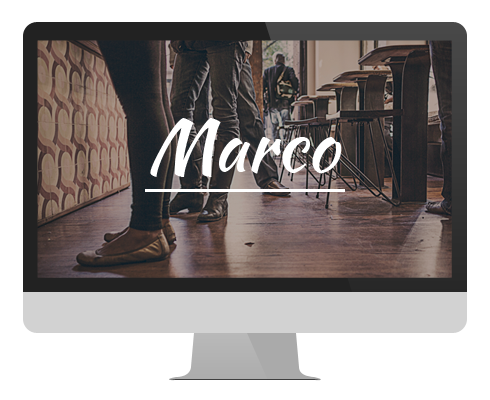
<style>
.page{position:relative;width:490px;height:400px;background:#ffffff}
.page>*{position:absolute;margin:0}
.t1{font:72px "KaushanScript-Regular";color:#ffffff}
</style>
<div class="page">
<p class="t1" style="left:150px;top:118px;width:192px;height:59px">Marco</p>
</div>
